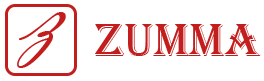
<style>
.page{position:relative;width:264px;height:81px;background:#ffffff}
.page>*{position:absolute;margin:0}
.t1{font:100px "VladimirScript";color:#c31e1e}
.t2{font:48px "Algerian";color:#c31e1e}
</style>
<div class="page">
<p class="t1" style="left:17px;top:12px;width:49px;height:56px">z</p>
<p class="t2" style="left:95px;top:24px;width:166px;height:32px">zumma</p>
</div>
